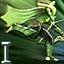
<style>
.page{position:relative;width:64px;height:64px}
.page>*{position:absolute;margin:0}
.t1{font:30px "Tahoma"}
</style>
<div class="page">
<p class="t1" style="left:1px;top:42px;width:10px;height:22px">I</p>
</div>
